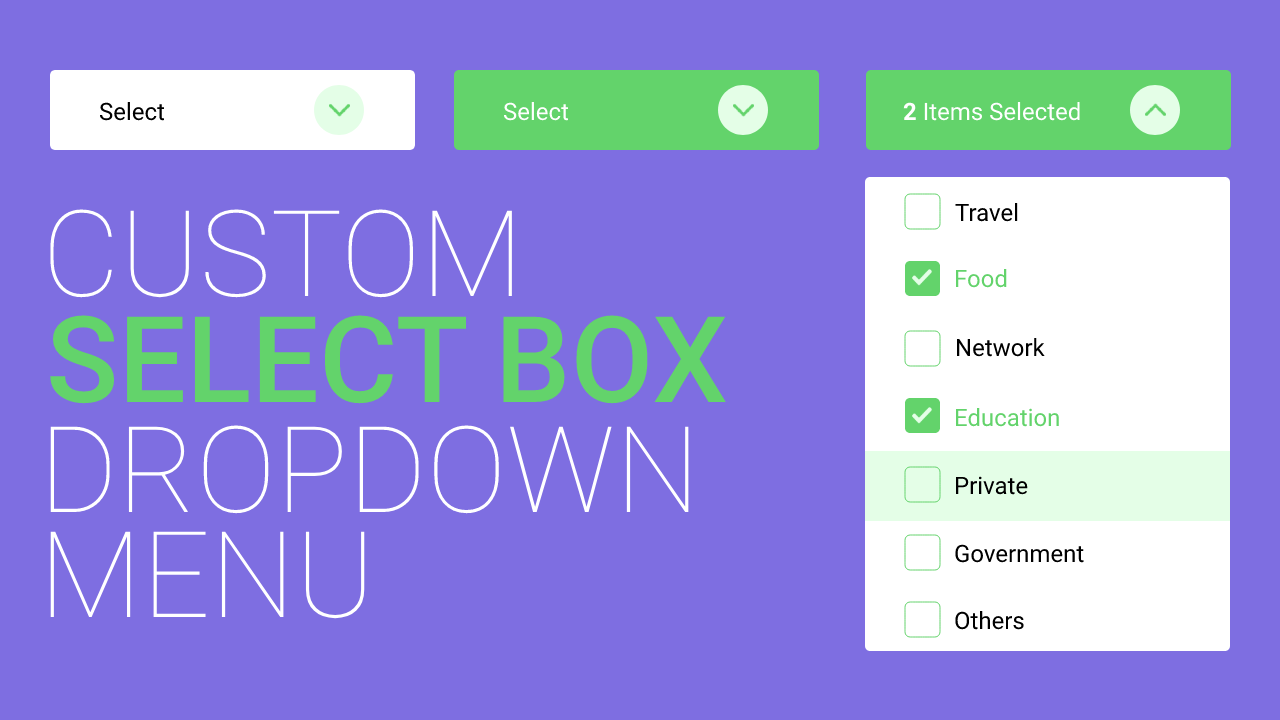
<style>
.page{position:relative;width:1280px;height:720px;background:#7e6ee1}
.page>*{position:absolute;margin:0}
.t1{font:24px "Roboto-Regular";color:#000000}
.t2{font:24px "Roboto-Regular";color:#ffffff}
.t3{font:24px "Roboto-Bold";color:#ffffff}
.t4{font:120px "Roboto-Thin";color:#ffffff}
.t5{font:24px "Roboto-Regular";color:#63d36b}
.t6{font:120px "Roboto-Medium";color:#63d36b}
</style>
<div class="page">
<p class="t1" style="left:99px;top:102px;width:66px;height:19px">Select</p>
<p class="t2" style="left:503px;top:102px;width:66px;height:19px">Select</p>
<p class="t2" style="left:903px;top:102px;width:177px;height:19px"><span class="t3">2 </span>Items Selected</p>
<p class="t4" style="left:50px;top:209px;width:462px;height:89px">CUSTOM</p>
<p class="t1" style="left:955px;top:203px;width:63px;height:19px">Travel</p>
<p class="t5" style="left:955px;top:269px;width:52px;height:19px">Food</p>
<p class="t6" style="left:50px;top:315px;width:676px;height:89px">SELECT BOX</p>
<p class="t1" style="left:956px;top:338px;width:89px;height:19px">Network</p>
<p class="t5" style="left:955px;top:408px;width:104px;height:19px">Education</p>
<p class="t4" style="left:50px;top:425px;width:639px;height:89px">DROPDOWN</p>
<p class="t1" style="left:955px;top:476px;width:73px;height:19px">Private</p>
<p class="t4" style="left:50px;top:531px;width:315px;height:88px">MENU</p>
<p class="t1" style="left:955px;top:544px;width:129px;height:19px">Government</p>
<p class="t1" style="left:955px;top:611px;width:69px;height:19px">Others</p>
</div>
